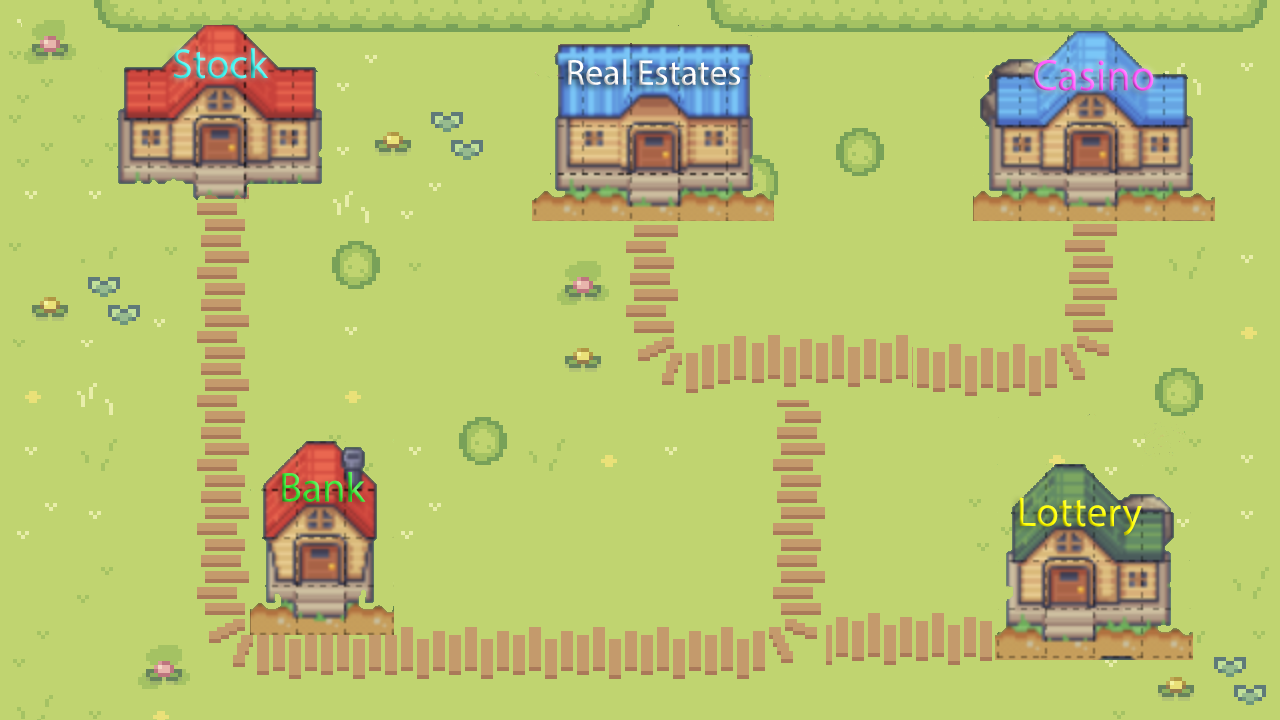
<style>
.page{position:relative;width:1280px;height:720px;background:#c0d470}
.page>*{position:absolute;margin:0}
.t1{font:42px "MyriadPro-Regular"}
.t2{font:36px "MyriadPro-Regular";color:#ffffff}
.t3{font:44px "MyriadPro-Regular"}
</style>
<div class="page">
<p class="t1" style="left:173px;top:48px;width:95px;height:31px">Stock</p>
<p class="t2" style="left:568px;top:59px;width:172px;height:27px">Real Estates</p>
<p class="t3" style="left:1033px;top:60px;width:121px;height:31px">Casino</p>
<p class="t1" style="left:282px;top:472px;width:84px;height:30px">Bank</p>
<p class="t1" style="left:1019px;top:497px;width:123px;height:39px">Lottery</p>
</div>
